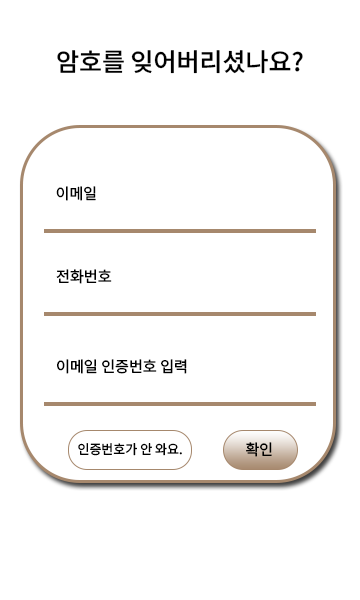
<style>
.page{position:relative;width:360px;height:600px;background:#ffffff}
.page>*{position:absolute;margin:0}
.t1{font:25px "NotoSansKR-Medium";color:#000000}
.t2{font:15px "NotoSansKR-Regular";color:#000000}
.t3{font:13px "NotoSansKR-Regular";color:#000000}
</style>
<div class="page">
<p class="t1" style="left:57px;top:50px;width:246px;height:24px">암호를 잊어버리셨나요?</p>
<p class="t2" style="left:56px;top:186px;width:40px;height:15px">이메일</p>
<p class="t2" style="left:56px;top:269px;width:56px;height:15px">전화번호</p>
<p class="t2" style="left:57px;top:359px;width:130px;height:15px">이메일 인증번호 입력</p>
<p class="t3" style="left:78px;top:443px;width:104px;height:13px">인증번호가 안 와요.</p>
<p class="t2" style="left:246px;top:442px;width:26px;height:15px">확인</p>
</div>
